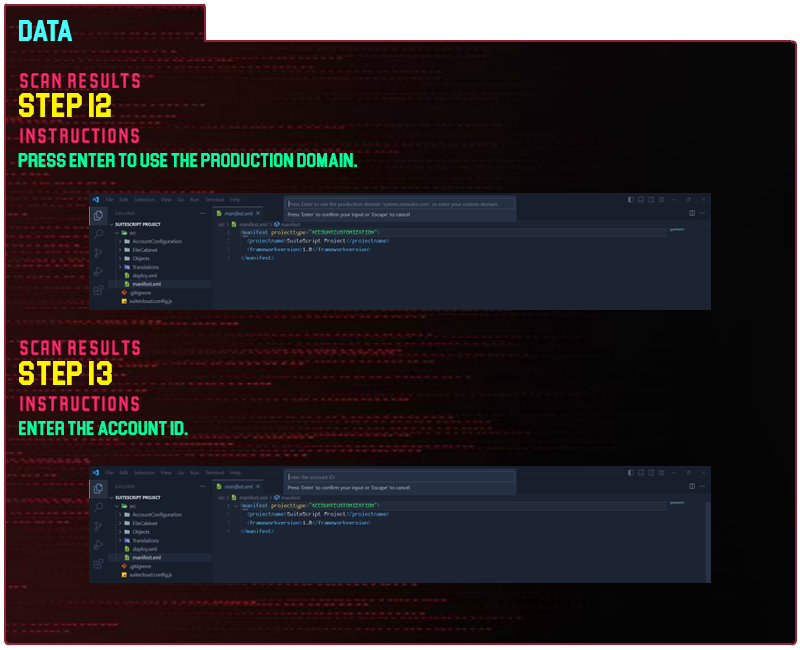
<style>
.page{position:relative;width:800px;height:650px}
.page>*{position:absolute;margin:0}
.t1{font:30px "Blockletter";color:#43ffff}
.t2{font:35px "Party-Lights-[WLM]-Flat";color:#ff296d}
.t3{font:35px "Blockletter";color:#fdf500}
.t4{font:20px "Blockletter";color:#00ff9f}
.t5{font:34.9px "Party-Lights-[WLM]-Flat";color:#ff296d}
.t6{font:34.9px "Blockletter";color:#fdf500}
.t7{font:19.9px "Blockletter";color:#00ff9f}
</style>
<div class="page">
<p class="t1" style="left:19px;top:20px;width:54px;height:21px">Data</p>
<p class="t2" style="left:20px;top:73px;width:120px;height:15px">Scan REsults</p>
<p class="t3" style="left:19px;top:93px;width:92px;height:24px">Step 12</p>
<p class="t2" style="left:20px;top:128px;width:119px;height:15px">instructions</p>
<p class="t4" style="left:18px;top:153px;width:339px;height:14px">Press enter to use the production domain.</p>
<p class="t5" style="left:20px;top:340px;width:120px;height:15px">Scan REsults</p>
<p class="t6" style="left:19px;top:361px;width:93px;height:24px">Step 13</p>
<p class="t5" style="left:20px;top:396px;width:119px;height:15px">instructions</p>
<p class="t7" style="left:19px;top:421px;width:169px;height:14px">Enter the account id.</p>
</div>
